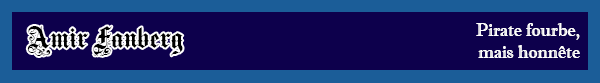
<style>
.page{position:relative;width:600px;height:83px;background:#0d004c}
.page>*{position:absolute;margin:0}
.t1{font:30px "MediciText";color:#000000}
.t2{font:18px "ImprintMT-Shadow";color:#ffffff}
</style>
<div class="page">
<p class="t1" style="left:27px;top:26px;width:156px;height:30px">Amir Fanberg</p>
<p class="t2" style="left:476px;top:23px;width:104px;height:35px;text-align:right">Pirate fourbe,<br>mais honnête</p>
</div>
